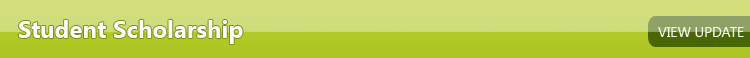
<style>
.page{position:relative;width:750px;height:58px}
.page>*{position:absolute;margin:0}
.t1{font:24px "SegoeUI-Bold";color:#fefefe}
.t2{font:14px "SegoeUI";color:#f6f7f1}
</style>
<div class="page">
<p class="t1" style="left:19px;top:20px;width:224px;height:24px">Student Scholarship</p>
<p class="t2" style="left:658px;top:27px;width:86px;height:10px">VIEW UPDATE</p>
</div>
